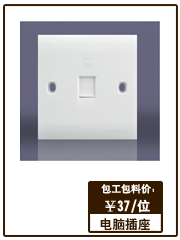
<style>
.page{position:relative;width:180px;height:240px;background:#ffffff}
.page>*{position:absolute;margin:0}
.t1{font:9.9px "HeitiCSEG";color:#fffefe}
.t2{font:13.3px "HeitiCSEG";color:#ffffff}
.t3{font:12.8px "HeitiCSEG";color:#361a00}
</style>
<div class="page">
<p class="t1" style="left:101px;top:184px;width:53px;height:10px">包工包料价：</p>
<p class="t2" style="left:105px;top:199px;width:45px;height:14px">￥37/位</p>
<p class="t3" style="left:100px;top:218px;width:50px;height:12px">电脑插座</p>
</div>
